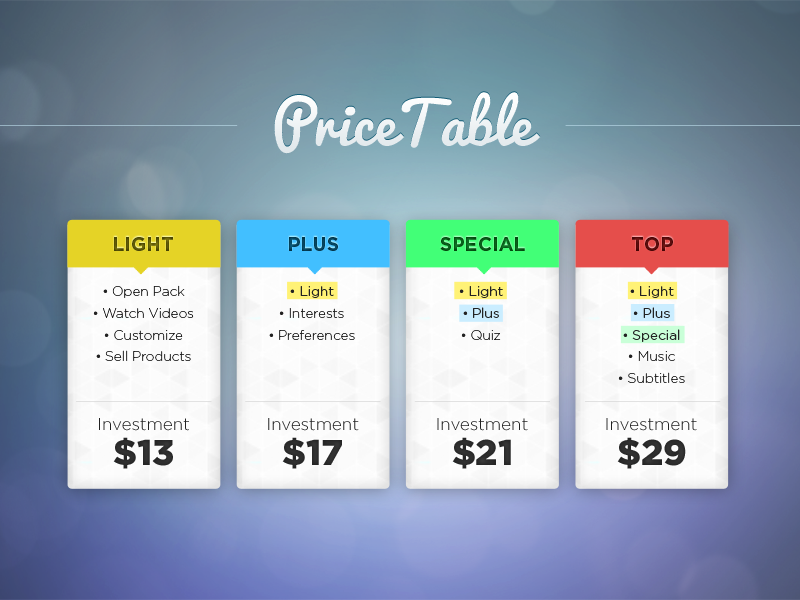
<style>
.page{position:relative;width:800px;height:600px}
.page>*{position:absolute;margin:0}
.t1{font:57.3px "Pacifico-Regular";letter-spacing:0.01em;color:#edf2f4}
.t2{font:19.3px "Gotham-Bold";color:#575206}
.t3{font:19.3px "Gotham-Bold";color:#05415a}
.t4{font:19.3px "Gotham-Bold";color:#075916}
.t5{font:19.3px "Gotham-Bold";color:#560b0a}
.t6{font:13.7px/21.8px "Gotham-ExtraLight";color:#131313}
.t7{font:13.7px/21.8px "Gotham-ExtraLight";color:#eada42}
.t8{font:13.7px/21.8px "Gotham-Light";color:#eada42}
.t9{font:13.7px/21.8px "Gotham-ExtraLight";color:#222222}
.t10{font:13.7px/21.8px "Gotham-Light";color:#222222}
.t11{font:17px "Gotham-Light";color:#222222}
.t12{font:35.8px "Gotham-Black";color:#2c2c2c}
</style>
<div class="page">
<p class="t1" style="left:274px;top:92px;width:267px;height:62px">PriceTable</p>
<p class="t2" style="left:114px;top:237px;width:59px;height:14px">LIGHT</p>
<p class="t3" style="left:289px;top:237px;width:49px;height:14px">PLUS</p>
<p class="t4" style="left:440px;top:237px;width:85px;height:14px">SPECIAL</p>
<p class="t5" style="left:632px;top:237px;width:41px;height:14px">TOP</p>
<p class="t6" style="left:93px;top:285px;width:101px;height:76px;text-align:center">• Open Pack<br>• Watch Videos<br>• Customize<br>• Sell Products</p>
<p class="t6" style="left:269px;top:286px;width:86px;height:54px;text-align:center"><span class="t7">• </span><span class="t8">Light<br></span>• Interests<br>• Preferences</p>
<p class="t9" style="left:459px;top:286px;width:44px;height:54px;text-align:center">• <span class="t10">Light<br></span>• <span class="t10">Plus<br></span>• Quiz</p>
<p class="t9" style="left:618px;top:286px;width:67px;height:97px;text-align:center">• <span class="t10">Light<br></span>• <span class="t10">Plus<br></span>• <span class="t10">Special<br></span>• Music<br>• Subtitles</p>
<p class="t11" style="left:99px;top:418px;width:90px;height:13px">Investment</p>
<p class="t11" style="left:268px;top:418px;width:91px;height:13px">Investment</p>
<p class="t11" style="left:437px;top:418px;width:91px;height:13px">Investment</p>
<p class="t11" style="left:606px;top:418px;width:91px;height:13px">Investment</p>
<p class="t12" style="left:113px;top:437px;width:60px;height:32px">$13</p>
<p class="t12" style="left:282px;top:437px;width:60px;height:32px">$17</p>
<p class="t12" style="left:452px;top:437px;width:59px;height:32px">$21</p>
<p class="t12" style="left:617px;top:437px;width:69px;height:32px">$29</p>
</div>
